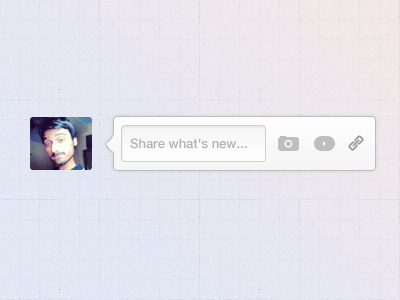
<style>
.page{position:relative;width:400px;height:300px}
.page>*{position:absolute;margin:0}
.t1{font:13px "HelveticaNeue-Medium";color:#b2b2b2}
</style>
<div class="page">
<p class="t1" style="left:130px;top:138px;width:117px;height:11px">Share what's new...</p>
</div>
